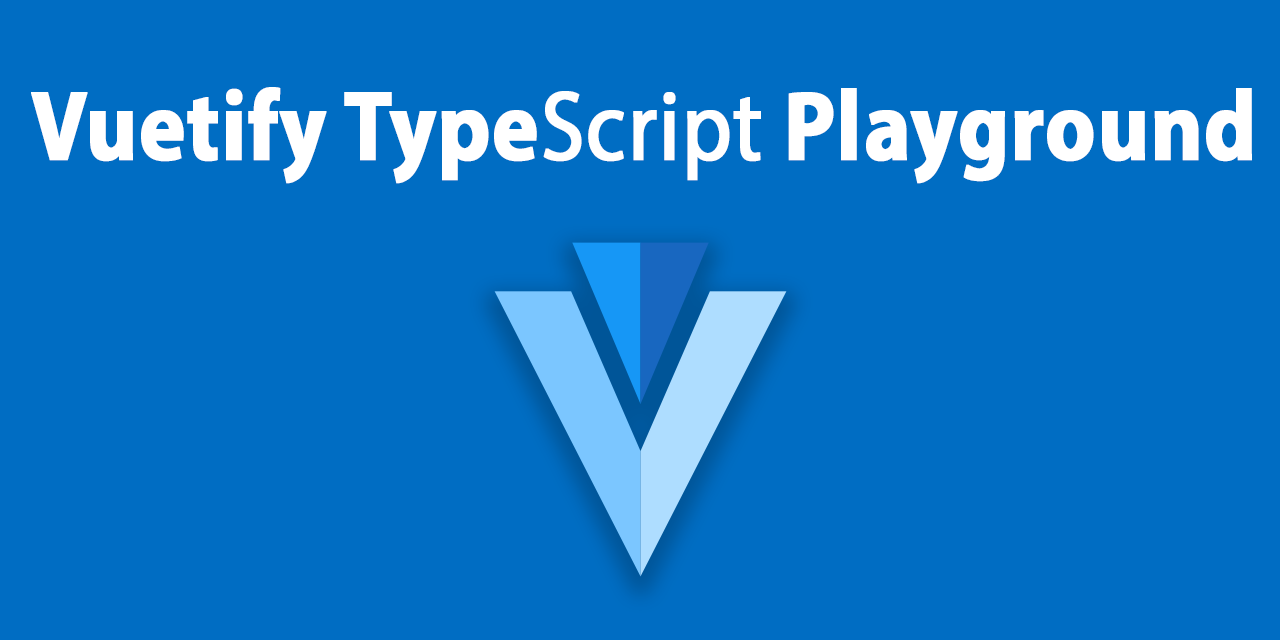
<style>
.page{position:relative;width:1280px;height:640px;background:#006dc3}
.page>*{position:absolute;margin:0}
.t1{font:100px "MyriadPro-Bold";color:#ffffff;font-weight:bold;scale:0.87 1}
.t2{font:100px "MyriadPro-Regular";color:#ffffff;font-weight:bold;scale:0.87 1}
</style>
<div class="page">
<p class="t1" style="left:31px;top:87px;width:1221px;height:97px">Vuetify Type<span class="t2">Script</span> Playground</p>
</div>
